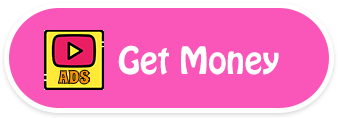
<style>
.page{position:relative;width:338px;height:118px;background:#fa55b8}
.page>*{position:absolute;margin:0}
.t1{font:33.3px "HoboStd";color:#ffffff}
</style>
<div class="page">
<p class="t1" style="left:118px;top:45px;width:161px;height:30px">Get Money</p>
</div>
